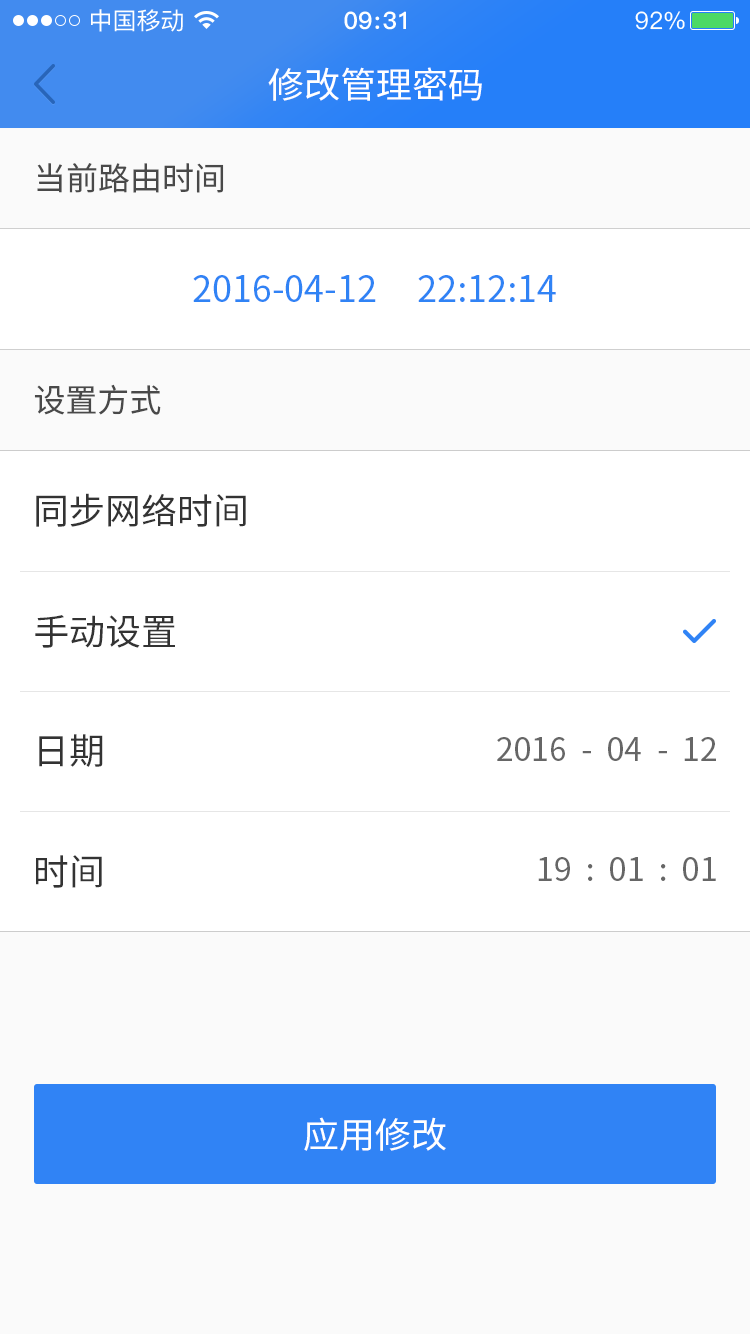
<style>
.page{position:relative;width:750px;height:1334px;background:#ffffff}
.page>*{position:absolute;margin:0}
.t1{font:36px "SourceHanSansCN-Regular";color:#ffffff}
.t2{font:32px "SourceHanSansCN-Regular";color:#494949}
.t3{font:36px "SourceHanSansCN-Regular";color:#3083f5}
.t4{font:36px "SourceHanSansCN-Regular";color:#333333}
.t5{font:32px "SourceHanSansCN-Regular";color:#666666}
</style>
<div class="page">
<p class="t1" style="left:268px;top:67px;width:214px;height:34px">修改管理密码</p>
<p class="t2" style="left:37px;top:163px;width:187px;height:30px">当前路由时间</p>
<p class="t3" style="left:193px;top:275px;width:363px;height:27px">2016-04-12     22:12:14</p>
<p class="t2" style="left:34px;top:384px;width:127px;height:31px">设置方式</p>
<p class="t4" style="left:36px;top:493px;width:210px;height:34px">同步网络时间</p>
<p class="t4" style="left:35px;top:615px;width:140px;height:33px">手动设置</p>
<p class="t4" style="left:39px;top:734px;width:64px;height:33px">日期</p>
<p class="t5" style="left:497px;top:737px;width:219px;height:24px">2016  -  04  -  12</p>
<p class="t4" style="left:36px;top:855px;width:66px;height:33px">时间</p>
<p class="t5" style="left:538px;top:857px;width:178px;height:24px">19  :  01  :  01</p>
<p class="t1" style="left:304px;top:1117px;width:142px;height:34px">应用修改</p>
</div>
